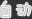
<style>
.page{position:relative;width:32px;height:19px;background:#333333}
.page>*{position:absolute;margin:0}
.t1{font:20px "¢è?";color:#cacaca}
</style>
<div class="page">
<p class="t1" style="left:1px;top:1px;width:30px;height:17px">自动</p>
</div>
